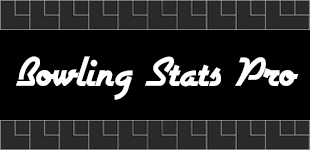
<style>
.page{position:relative;width:310px;height:150px;background:#000000}
.page>*{position:absolute;margin:0}
.t1{font:48px "Airstream";color:#ffffff}
</style>
<div class="page">
<p class="t1" style="left:16px;top:56px;width:283px;height:44px">Bowling Stats Pro</p>
</div>
